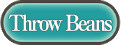
<style>
.page{position:relative;width:121px;height:45px}
.page>*{position:absolute;margin:0}
.t1{font:22px "RyuminPro-ExBold";letter-spacing:-0.12em;color:#fdfbf9;scale:0.9 1}
</style>
<div class="page">
<p class="t1" style="left:8px;top:14px;width:104px;height:17px">Throw Beans</p>
</div>
